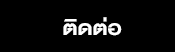
<style>
.page{position:relative;width:175px;height:52px;background:#000000}
.page>*{position:absolute;margin:0}
.t1{font:30.4px "DBHelvethaicaX-BdExt";color:#ffffff}
</style>
<div class="page">
<p class="t1" style="left:63px;top:17px;width:59px;height:19px">ติดต่อ</p>
</div>
